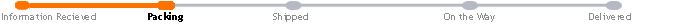
<style>
.page{position:relative;width:700px;height:25px;background:#ffffff}
.page>*{position:absolute;margin:0}
.t1{font:10px "TrebuchetMS";color:#8b8b8b}
.t2{font:10px "TrebuchetMS";color:#8e8e8e}
.t3{font:10px "TrebuchetMS-Bold";color:#000000}
</style>
<div class="page">
<p class="t1" style="left:2px;top:12px;width:629px;height:10px"><span class="t2">Information Recieved </span><span class="t3">                Packing</span>                              Shipped                                             On the Way                               Delivered</p>
</div>
